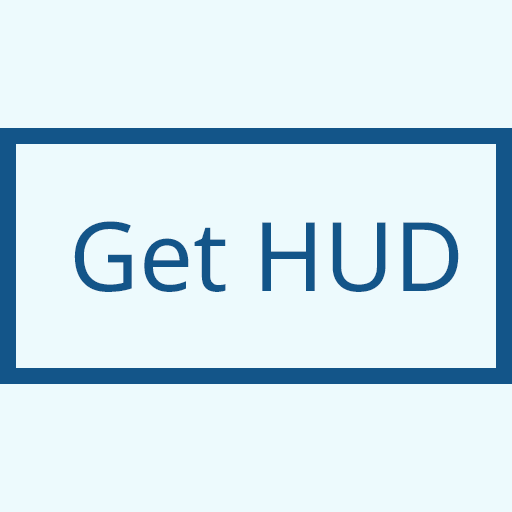
<style>
.page{position:relative;width:512px;height:512px;background:#edfafd}
.page>*{position:absolute;margin:0}
.t1{font:96px "NotoSans-Regular";color:#135589}
</style>
<div class="page">
<p class="t1" style="left:74px;top:221px;width:385px;height:71px">Get HUD</p>
</div>
